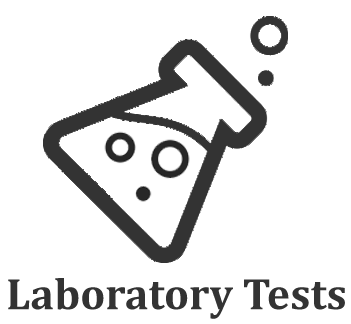
<style>
.page{position:relative;width:351px;height:324px;background:#ffffff}
.page>*{position:absolute;margin:0}
.t1{font:44.8px "Cambria-Bold";color:#333333}
</style>
<div class="page">
<p class="t1" style="left:8px;top:278px;width:337px;height:41px">Laboratory Tests</p>
</div>
